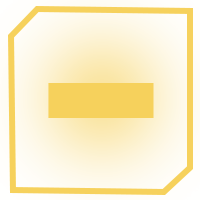
<style>
.page{position:relative;width:200px;height:200px}
.page>*{position:absolute;margin:0}
.t1{font:300px "SFIntellivised";letter-spacing:-0.05em;color:#f6d15c}
</style>
<div class="page">
<p class="t1" style="left:48px;top:83px;width:106px;height:35px">-</p>
</div>
